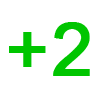
<style>
.page{position:relative;width:100px;height:100px;background:#ffffff}
.page>*{position:absolute;margin:0}
.t1{font:73px "ArialMT";letter-spacing:0.02em;color:#00c500;font-weight:bold}
</style>
<div class="page">
<p class="t1" style="left:9px;top:22px;width:81px;height:54px">+2</p>
</div>
